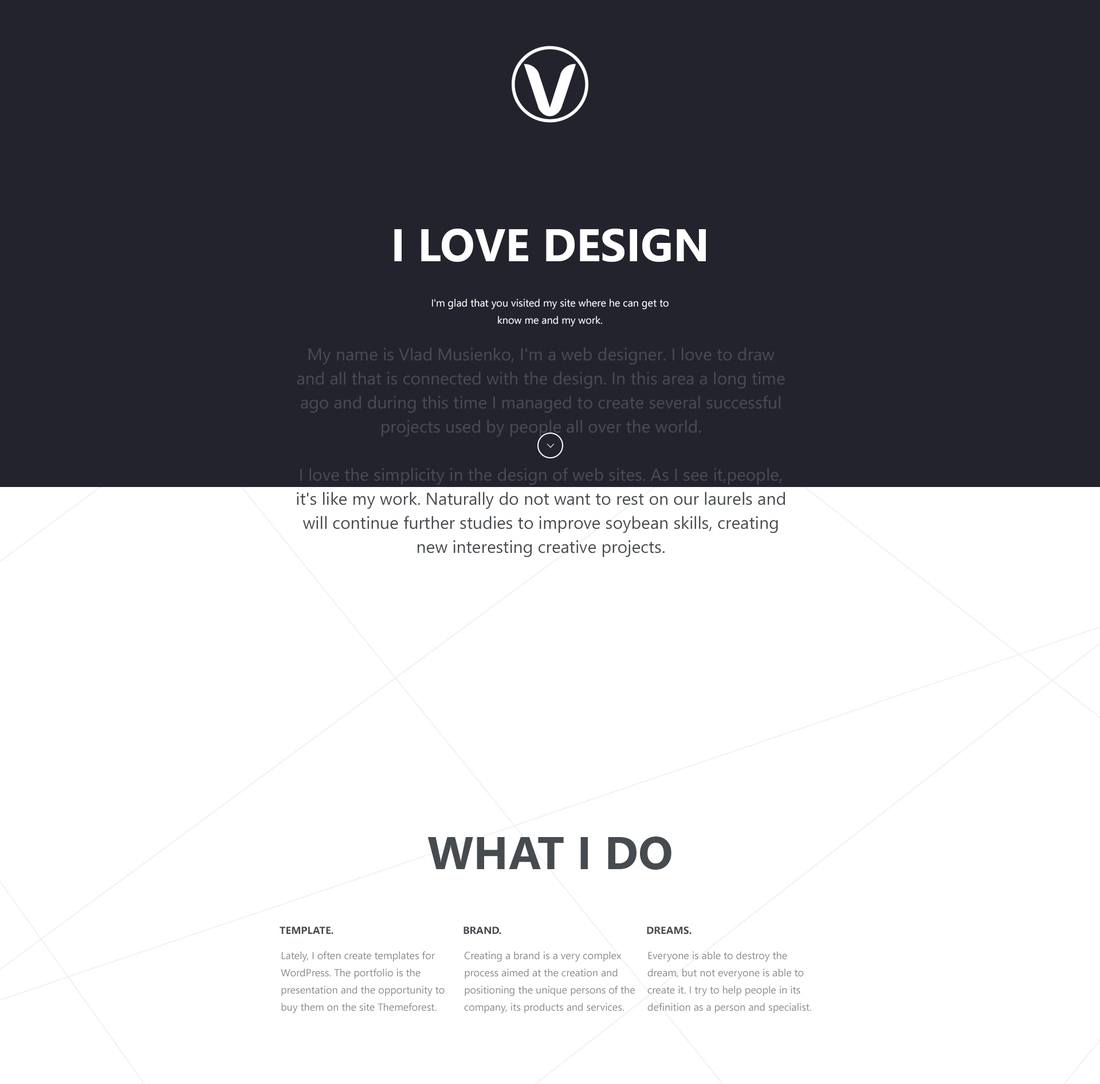
<style>
.page{position:relative;width:1100px;height:1084px;background:#ffffff}
.page>*{position:absolute;margin:0}
.t1{font:45.8px "SegoeUI-Bold";color:#ffffff;text-transform:uppercase}
.t2{font:10.3px/17.2px "SegoeUI";color:#ffffff}
.t3{font:45.8px "SegoeUI-Bold";color:#464b4f;text-transform:uppercase}
.t4{font:10.3px "SegoeUI-Bold";color:#464b4f}
.t5{font:10.3px/17.2px "SegoeUI";color:#888a8b}
</style>
<div class="page">
<p class="t1" style="left:394px;top:229px;width:312px;height:33px">i love design</p>
<p class="t2" style="left:432px;top:298px;width:237px;height:29px;text-align:center">I'm glad that you visited my site where he can get to know me and my work.</p>
<p class="t3" style="left:427px;top:836px;width:244px;height:34px">what i do</p>
<p class="t4" style="left:280px;top:926px;width:53px;height:8px">TEMPLATE.</p>
<p class="t4" style="left:464px;top:926px;width:37px;height:8px">BRAND.</p>
<p class="t4" style="left:647px;top:926px;width:45px;height:8px">DREAMS.</p>
<p class="t5" style="left:281px;top:951px;width:164px;height:63px">Lately, I often create templates for WordPress. The portfolio is the presentation and the opportunity to buy them on the site Themeforest.</p>
<p class="t5" style="left:464px;top:951px;width:171px;height:63px">Creating a brand is a very complex process aimed at the creation and positioning the unique persons of the company, its products and services.</p>
<p class="t5" style="left:647px;top:951px;width:164px;height:63px">Everyone is able to destroy the dream, but not everyone is able to create it. I try to help people in its definition as a person and specialist.</p>
</div>
